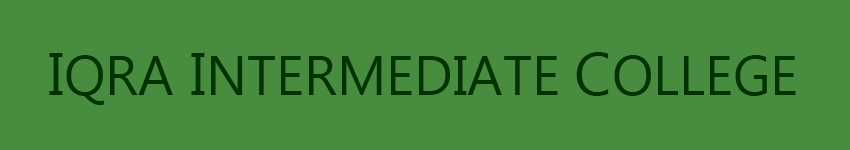
<style>
.page{position:relative;width:850px;height:150px;background:#488c40}
.page>*{position:absolute;margin:0}
.t1{font:55px "MicrosoftTaiLe";color:#003300}
.t2{font:60px "MicrosoftTaiLe";color:#003300}
</style>
<div class="page">
<p class="t1" style="left:49px;top:52px;width:747px;height:53px"><span class="t2">I</span>QRA<span class="t2"> I</span>NTERMEDIATE <span class="t2">C</span>OLLEGE</p>
</div>
